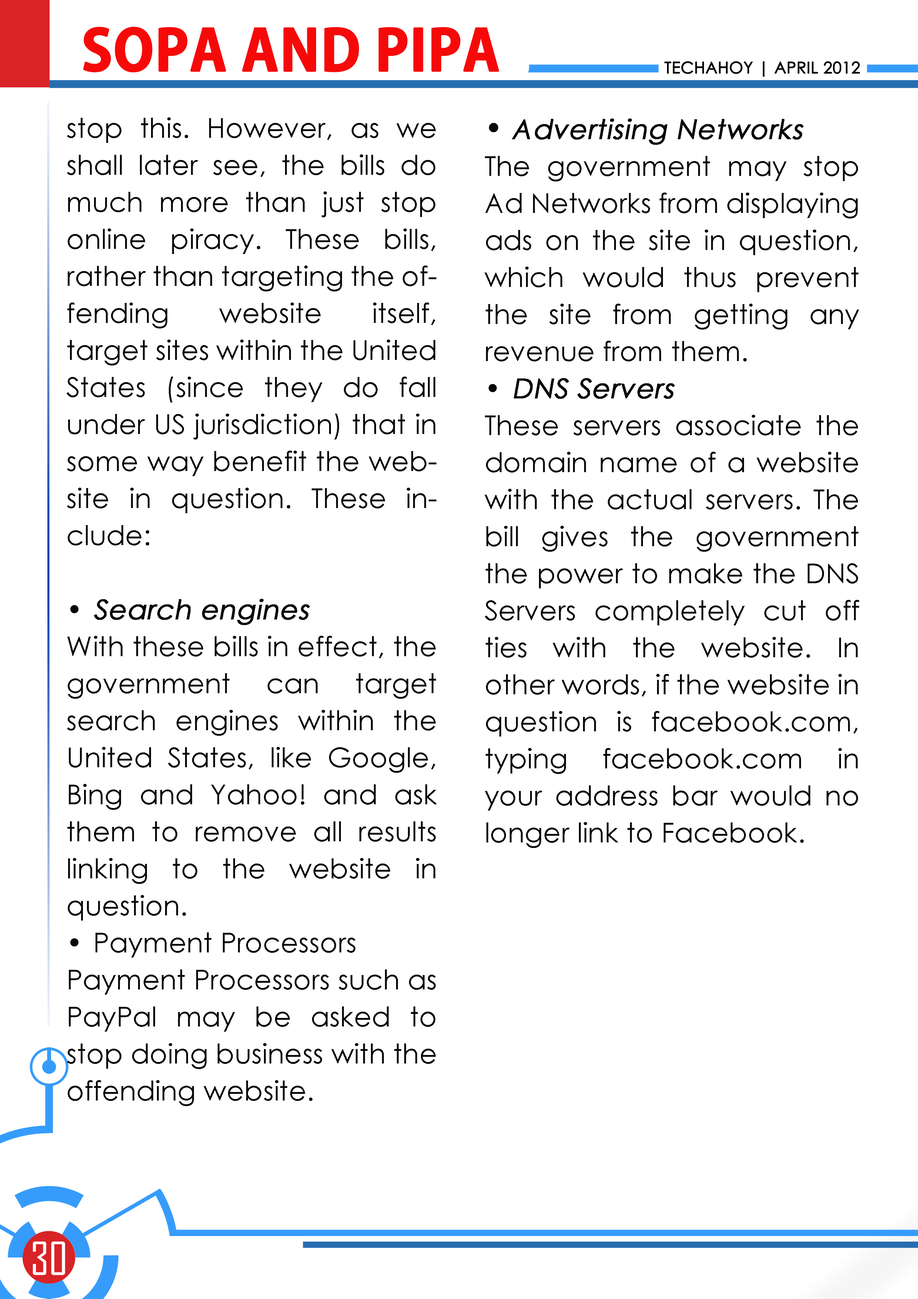
<style>
.page{position:relative;width:918px;height:1299px;background:#ffffff}
.page>*{position:absolute;margin:0}
.t1{font:55.5px "AdobeGothicStd-Bold";color:#f60909;text-transform:uppercase;font-weight:bold}
.t2{font:16px "CenturyGothic";color:#000000;text-transform:uppercase;font-weight:bold}
.t3{font:27.5px/37px "CenturyGothic";color:#080808}
.t4{font:27.5px/37px "CenturyGothic";color:#080808;font-weight:bold;font-style:italic}
.t5{font:31px/37px "CenturyGothic";color:#080808}
.t6{font:43.7px "AgencyFB-Reg";color:#ffffff;text-transform:uppercase}
</style>
<div class="page">
<p class="t1" style="left:83px;top:27px;width:416px;height:46px">sopa and pipa</p>
<p class="t2" style="left:665px;top:61px;width:195px;height:16px">techahoy | APRIL 2012</p>
<p class="t3" style="left:67px;top:117px;width:370px;height:989px;text-align:justify">stop this. However, as we shall later see, the bills do much more than just stop online piracy. These bills, rather than targeting the offending website itself, target sites within the United States (since they do fall under US jurisdiction) that in some way benefit the website in question. These include:<br><br>• <span class="t4">Search engines<br></span>With these bills in effect, the government can target search engines within the United States, like Google, Bing and Yahoo! and ask them to remove all results linking to the website in question.<br>• Payment Processors<br>Payment Processors such as PayPal may be asked to stop doing business with the offending website.</p>
<p class="t3" style="left:485px;top:118px;width:374px;height:730px;text-align:justify"><span class="t5">• </span><span class="t4">Advertising Networks<br></span>The government may stop Ad Networks from displaying ads on the site in question, which would thus prevent the site from getting any revenue from them.<br>• <span class="t4">DNS Servers<br></span>These servers associate the domain name of a website with the actual servers. The bill gives the government the power to make the DNS Servers completely cut off ties with the website. In other words, if the website in question is facebook.com, typing facebook.com in your address bar would no longer link to Facebook.</p>
<p class="t6" style="left:33px;top:1241px;width:32px;height:34px">30</p>
</div>
